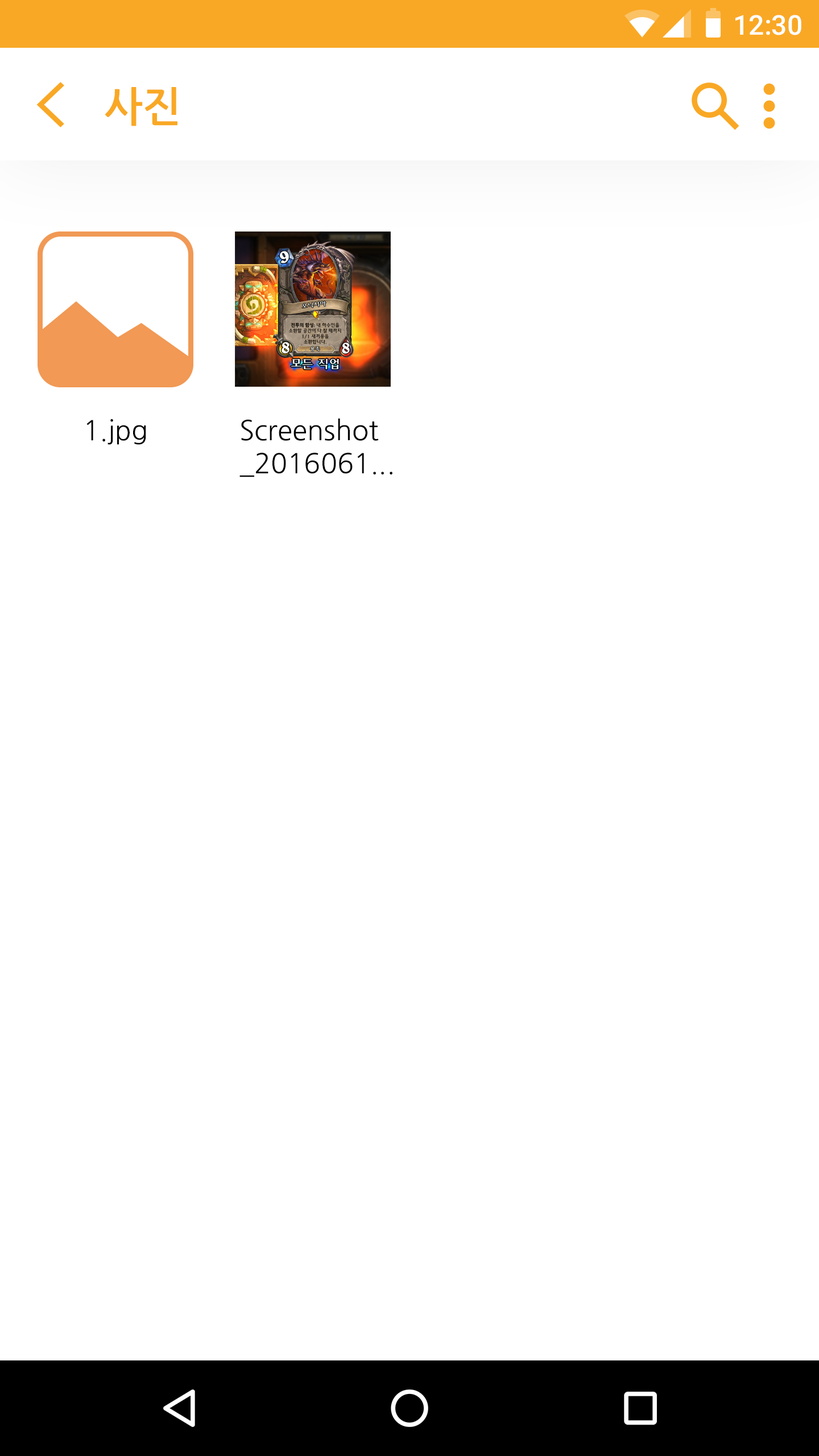
<style>
.page{position:relative;width:819px;height:1456px;background:#ffffff}
.page>*{position:absolute;margin:0}
.t1{font:27.3px "Roboto-Medium";color:#ffffff}
.t2{font:40.9px "NanumGothicBold";color:#f9a825}
.t3{font:27.3px "NanumGothic";color:#000000}
</style>
<div class="page">
<p class="t1" style="left:735px;top:15px;width:66px;height:20px">12:30</p>
<p class="t2" style="left:105px;top:87px;width:72px;height:39px">사진</p>
<p class="t3" style="left:86px;top:419px;width:60px;height:26px">1.jpg</p>
<p class="t3" style="left:239px;top:418px;width:153px;height:59px">Screenshot<br>_2016061...</p>
</div>
